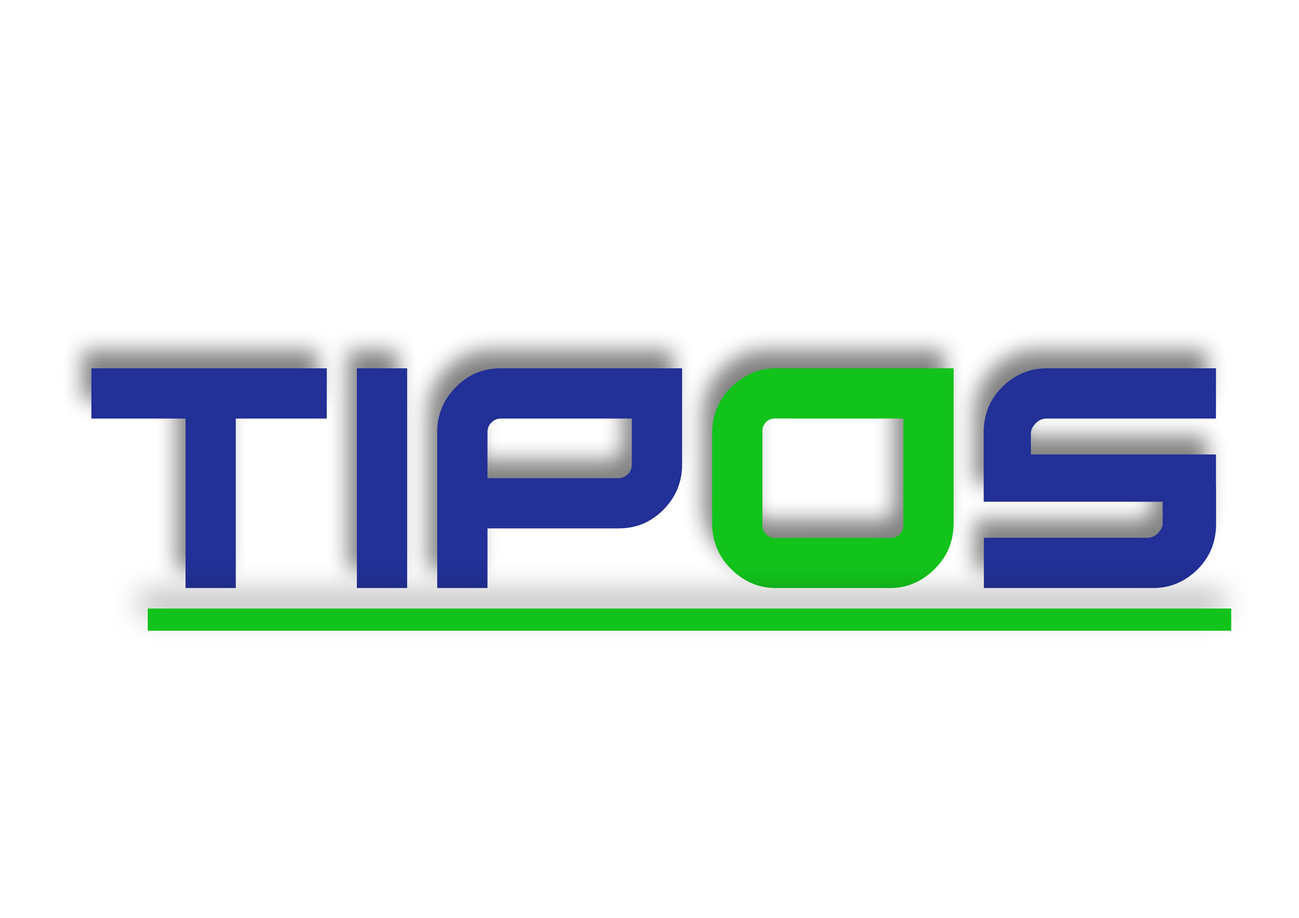
<style>
.page{position:relative;width:1299px;height:918px;background:#ffffff}
.page>*{position:absolute;margin:0}
.t1{font:308.5px "UnitedKingdom";color:#223097}
.t2{font:308.5px "UnitedKingdom";color:#12c31b}
</style>
<div class="page">
<p class="t1" style="left:91px;top:368px;width:1125px;height:220px">TIP<span class="t2">O</span>S</p>
</div>
